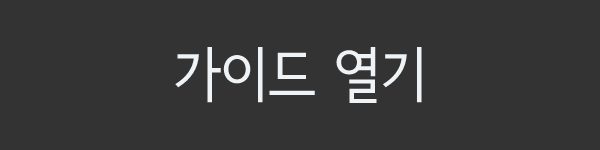
<style>
.page{position:relative;width:600px;height:150px;background:#333333}
.page>*{position:absolute;margin:0}
.t1{font:60px "SeN-CM";color:#eff3f6}
</style>
<div class="page">
<p class="t1" style="left:175px;top:46px;width:247px;height:58px">가이드 열기</p>
</div>
